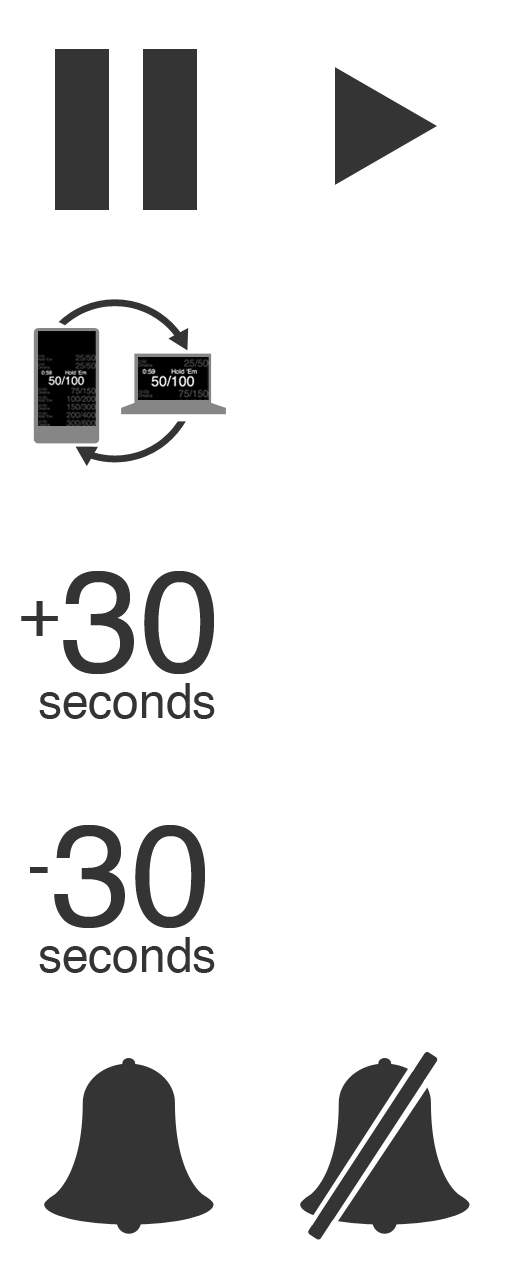
<style>
.page{position:relative;width:512px;height:1280px;background:#ffffff}
.page>*{position:absolute;margin:0}
.t1{font:144px "Helvetica";color:#343434}
.t2{font:72px "Helvetica";color:#343434}
.t3{font:48px "Helvetica";color:#343434}
</style>
<div class="page">
<p class="t1" style="left:21px;top:571px;width:193px;height:103px"><span class="t2">+</span>30</p>
<p class="t3" style="left:39px;top:683px;width:176px;height:36px">seconds</p>
<p class="t1" style="left:30px;top:825px;width:175px;height:103px"><span class="t2">-</span>30</p>
<p class="t3" style="left:39px;top:937px;width:176px;height:36px">seconds</p>
</div>
